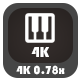
<style>
.page{position:relative;width:80px;height:80px;background:#464646}
.page>*{position:absolute;margin:0}
.t1{font:15px "Bauhaus93";color:#ffffff}
.t2{font:12px "Bauhaus93";color:#ffffff}
</style>
<div class="page">
<p class="t1" style="left:31px;top:47px;width:18px;height:10px">4K</p>
<p class="t2" style="left:16px;top:65px;width:49px;height:10px">4K 0.78x</p>
</div>
